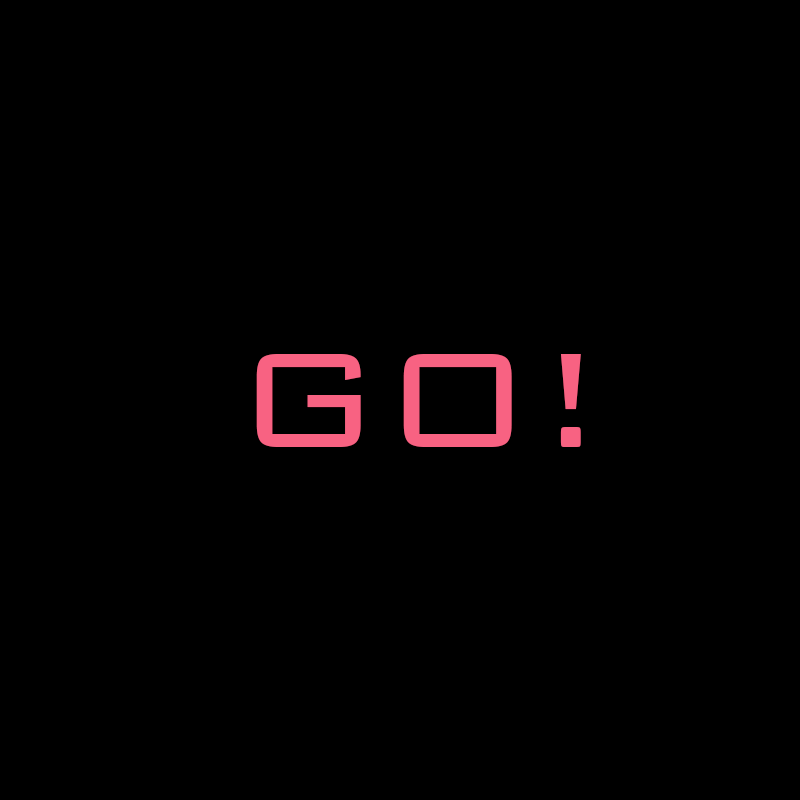
<style>
.page{position:relative;width:800px;height:800px;background:#000000}
.page>*{position:absolute;margin:0}
.t1{font:180px "BankGothicBT-Light";color:#f86282}
</style>
<div class="page">
<p class="t1" style="left:256px;top:354px;width:325px;height:93px">GO!</p>
</div>
